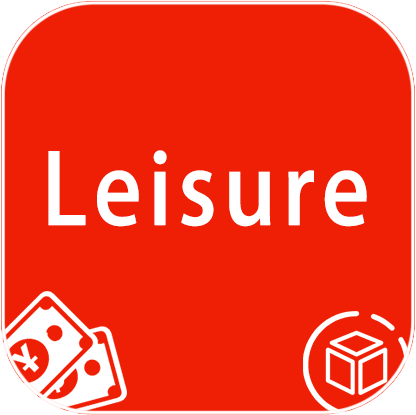
<style>
.page{position:relative;width:416px;height:415px;background:#ef1f05}
.page>*{position:absolute;margin:0}
.t1{font:95.9px "AdobeHeitiStd-Regular";letter-spacing:0.05em;color:#ffffff;font-weight:bold;scale:0.92 1}
</style>
<div class="page">
<p class="t1" style="left:48px;top:150px;width:319px;height:77px">Leisure</p>
</div>
